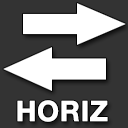
<style>
.page{position:relative;width:128px;height:128px;background:#333333}
.page>*{position:absolute;margin:0}
.t1{font:28px "HelveticaNeue-Bold";color:#ffffff;font-weight:bold}
</style>
<div class="page">
<p class="t1" style="left:17px;top:100px;width:91px;height:22px">HORIZ</p>
</div>
